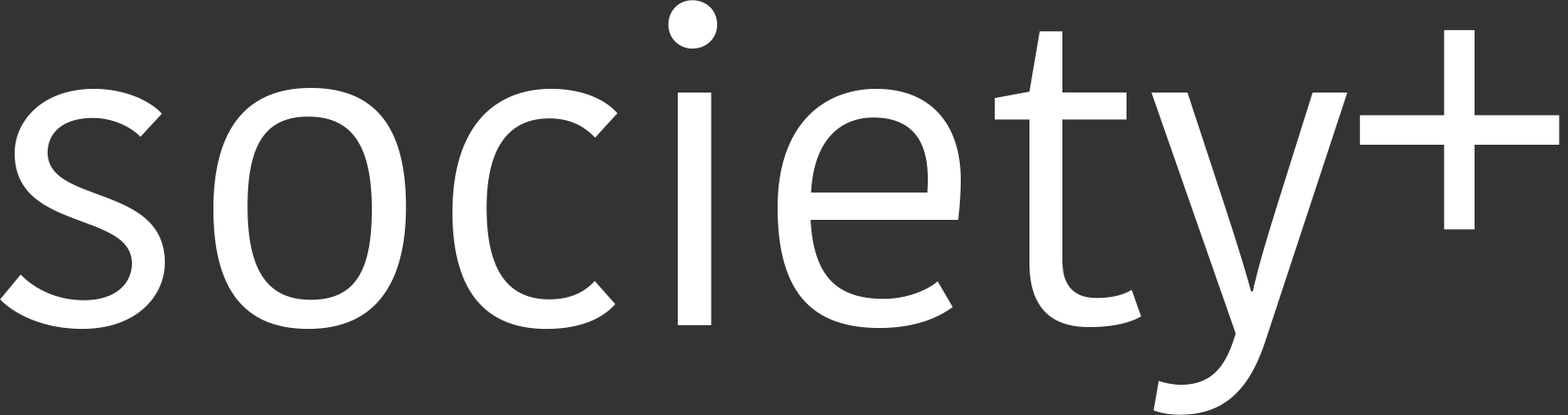
<style>
.page{position:relative;width:1568px;height:415px;background:#333333}
.page>*{position:absolute;margin:0}
.t1{font:427.4px "KohinoorBangla-Regular";color:#ffffff}
</style>
<div class="page">
<p class="t1" style="left:0px;top:0px;width:1347px;height:415px">society</p>
<p class="t1" style="left:1359px;top:29px;width:201px;height:201px">+</p>
</div>
